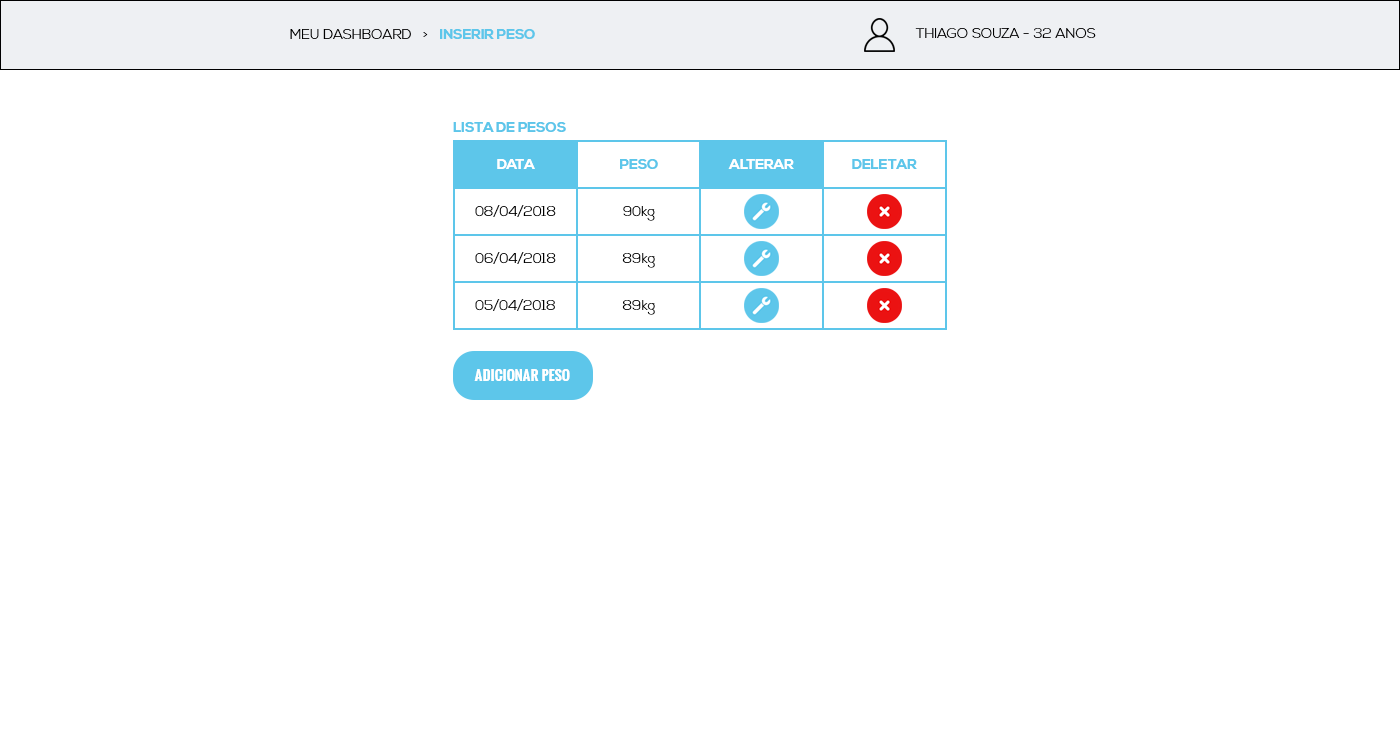
<style>
.page{position:relative;width:1400px;height:741px;background:#ffffff}
.page>*{position:absolute;margin:0}
.t1{font:14px "NexaLight";color:#000000}
.t2{font:14px "NexaBold";color:#5dc6ea}
.t3{font:14px "NexaBold";color:#ffffff}
.t4{font:14px "Oswald-Bold";color:#ffffff}
</style>
<div class="page">
<p class="t1" style="left:290px;top:29px;width:245px;height:10px">MEU DASHBOARD   &gt;   <span class="t2">INSERIR PESO</span></p>
<p class="t1" style="left:915px;top:28px;width:181px;height:10px">THIAGO SOUZA - 32 ANOS</p>
<p class="t2" style="left:453px;top:122px;width:113px;height:10px">LISTA DE PESOS</p>
<p class="t3" style="left:497px;top:159px;width:38px;height:10px">DATA</p>
<p class="t2" style="left:620px;top:159px;width:38px;height:10px">PESO</p>
<p class="t3" style="left:728px;top:159px;width:66px;height:10px">ALTERAR</p>
<p class="t2" style="left:852px;top:159px;width:65px;height:10px">DELETAR</p>
<p class="t1" style="left:475px;top:205px;width:81px;height:12px">08/04/2018</p>
<p class="t1" style="left:623px;top:206px;width:32px;height:15px">90kg</p>
<p class="t1" style="left:475px;top:252px;width:81px;height:12px">06/04/2018</p>
<p class="t1" style="left:622px;top:253px;width:33px;height:15px">89kg</p>
<p class="t1" style="left:475px;top:299px;width:80px;height:12px">05/04/2018</p>
<p class="t1" style="left:622px;top:300px;width:33px;height:15px">89kg</p>
<p class="t4" style="left:474px;top:369px;width:96px;height:12px">ADICIONAR PESO</p>
</div>
